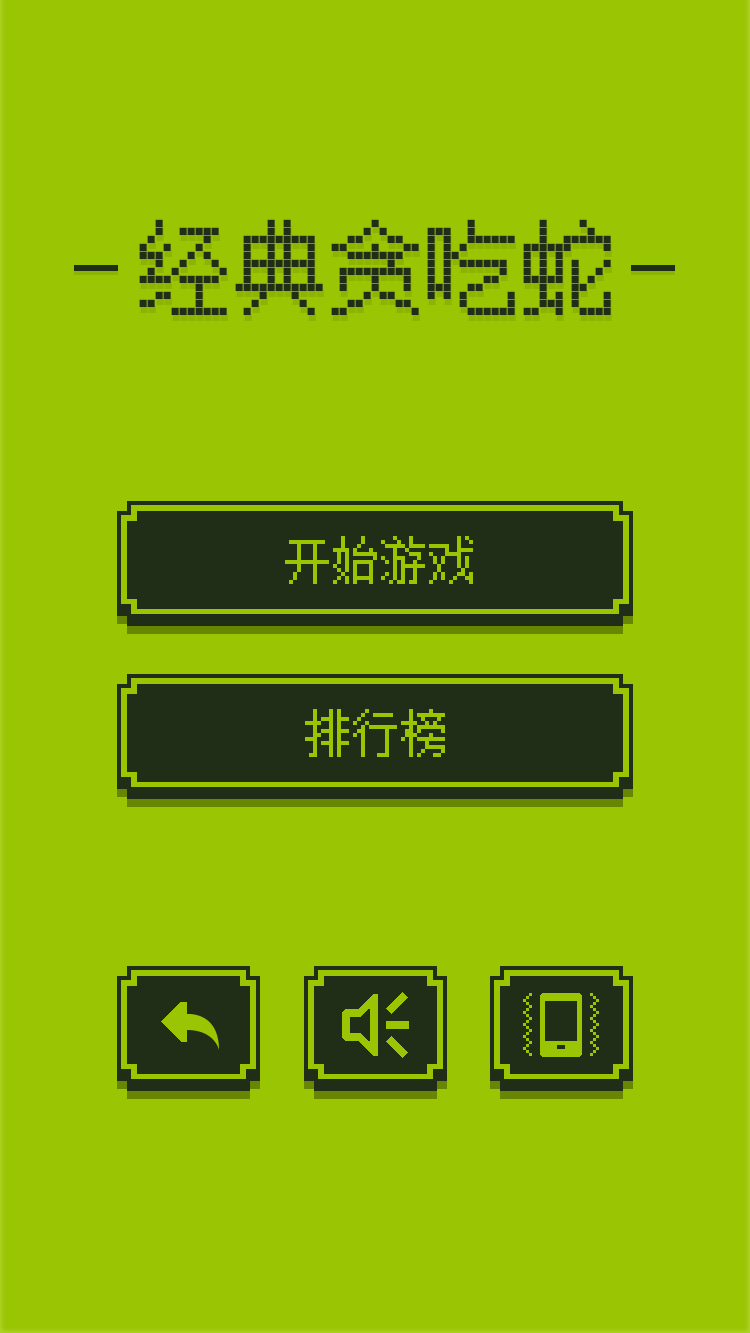
<style>
.page{position:relative;width:750px;height:1333px;background:#9ac503}
.page>*{position:absolute;margin:0}
.t1{font:96px "FZXS12--GB1-0";color:#202e17}
.t2{font:48px "FZXS12--GB1-0";color:#9ac503}
</style>
<div class="page">
<p class="t1" style="left:139px;top:219px;width:472px;height:96px">经典贪吃蛇</p>
<p class="t2" style="left:285px;top:536px;width:188px;height:48px">开始游戏</p>
<p class="t2" style="left:305px;top:709px;width:140px;height:48px">排行榜</p>
</div>
